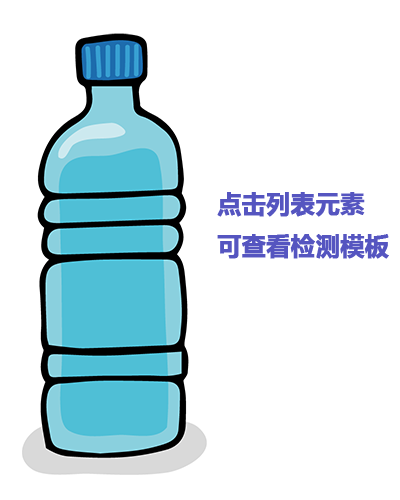
<style>
.page{position:relative;width:400px;height:500px;background:#ffffff}
.page>*{position:absolute;margin:0}
.t1{font:24px "MicrosoftYaHei-Bold";color:#5555c0;font-weight:bold}
</style>
<div class="page">
<p class="t1" style="left:217px;top:192px;width:172px;height:67px">点击列表元素<br>可查看检测模板</p>
</div>
